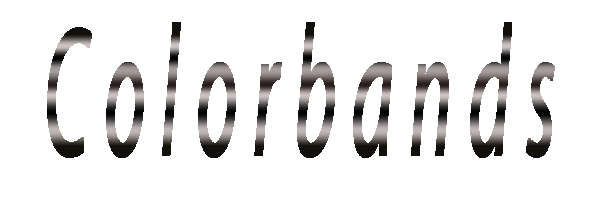
<style>
.page{position:relative;width:600px;height:200px;background:#ffffff}
.page>*{position:absolute;margin:0}
.t1{font:184px "MyriadPro-It";letter-spacing:0.18em;color:#000000;font-weight:bold;scale:0.43 1}
</style>
<div class="page">
<p class="t1" style="left:47px;top:22px;width:508px;height:136px">Colorbands</p>
</div>
